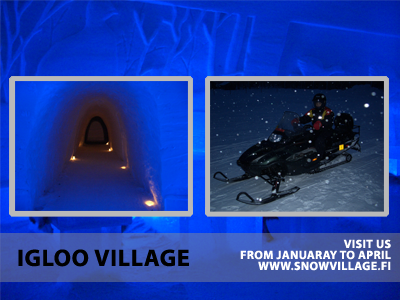
<style>
.page{position:relative;width:400px;height:300px}
.page>*{position:absolute;margin:0}
.t1{font:12px/11px "MyriadPro-Bold";letter-spacing:0.03em;color:#ffffff;text-transform:uppercase}
.t2{font:24px "MyriadPro-Bold";letter-spacing:0.03em;color:#000000;text-transform:uppercase}
</style>
<div class="page">
<p class="t1" style="left:240px;top:239px;width:151px;height:32px;text-align:right">VISIT US<br>FROM JANUARAY TO APRIL<br>www.snowvillage.fi</p>
<p class="t2" style="left:18px;top:249px;width:171px;height:18px">IGLOO VILLAGE</p>
</div>
